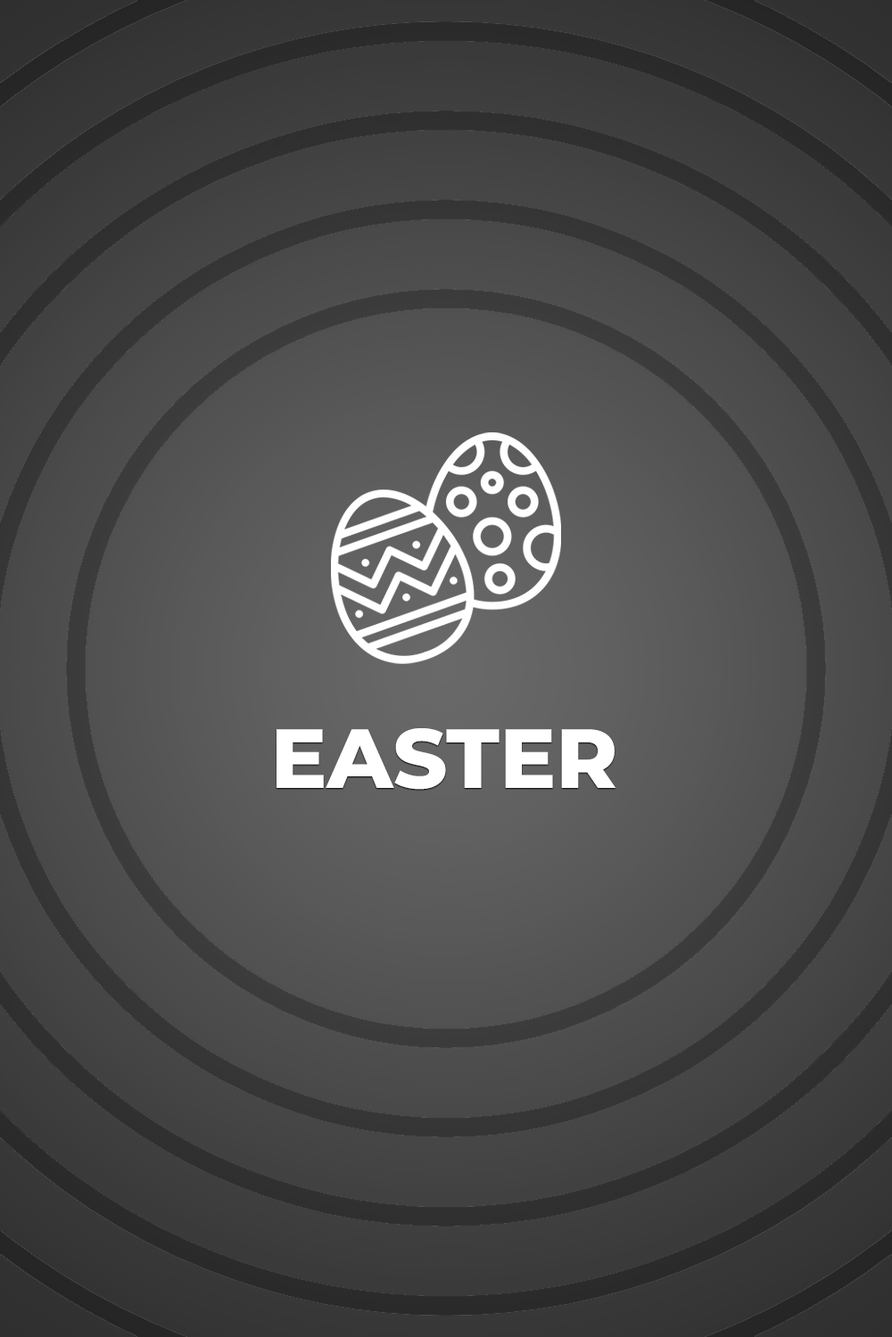
<style>
.page{position:relative;width:892px;height:1337px}
.page>*{position:absolute;margin:0}
.t1{font:83.8px "MontserratRoman-ExtraBold";color:#ffffff}
</style>
<div class="page">
<p class="t1" style="left:276px;top:728px;width:340px;height:62px">EASTER</p>
</div>
